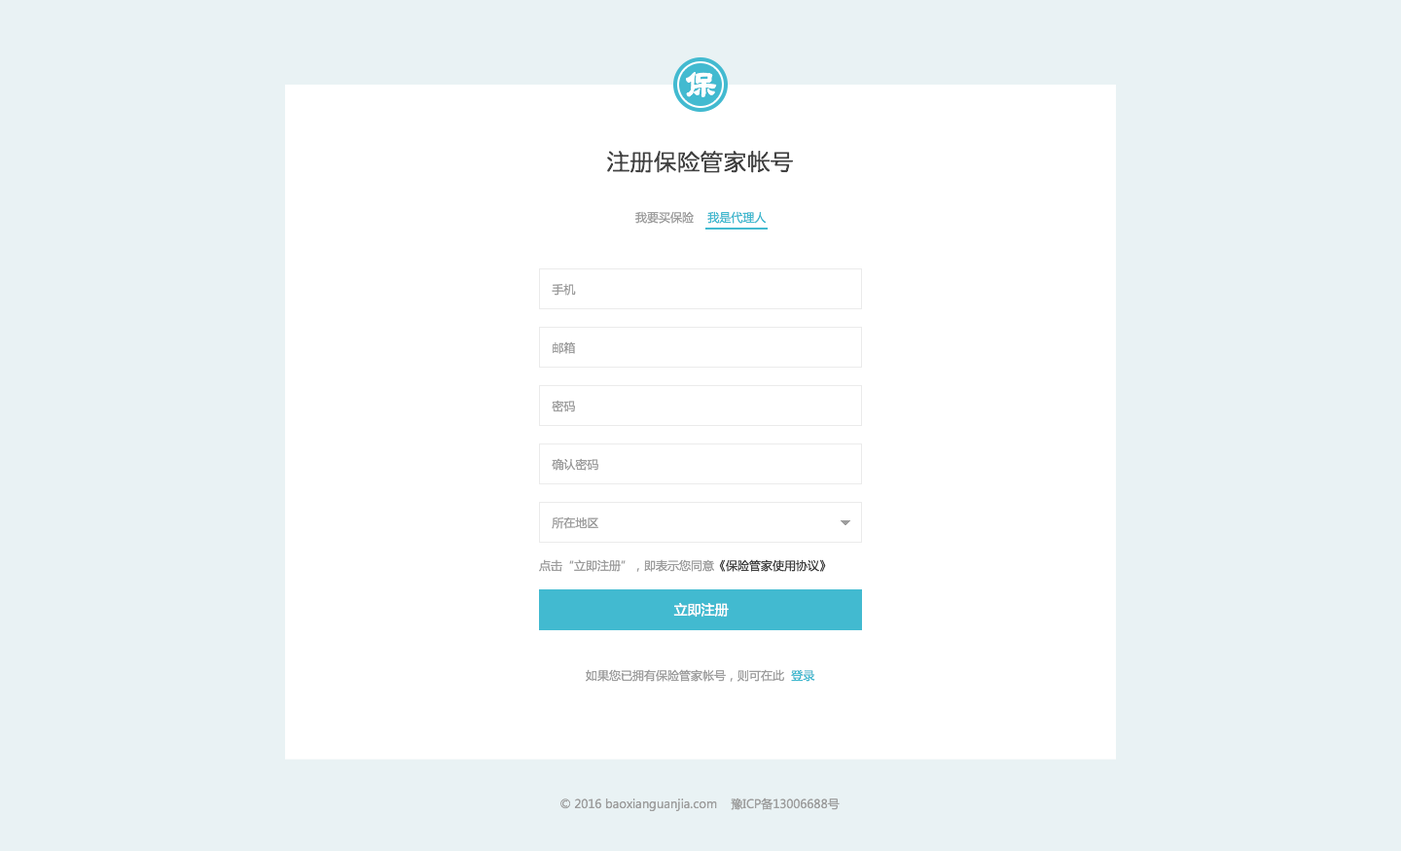
<style>
.page{position:relative;width:1401px;height:851px;background:#e9f2f4}
.page>*{position:absolute;margin:0}
.t1{font:31.1px "ReishoOtf";color:#ffffff}
.t2{font:23.3px "AaRoundLi";color:#424242}
.t3{font:11.7px "MicrosoftYaHei";color:#9e9e9e}
.t4{font:11.7px "MicrosoftYaHei";color:#42bad0}
.t5{font:11.7px "MicrosoftYaHei";color:#424242}
.t6{font:13.6px "MicrosoftYaHei";color:#ffffff}
</style>
<div class="page">
<p class="t1" style="left:686px;top:72px;width:31px;height:25px">保</p>
<p class="t2" style="left:607px;top:151px;width:186px;height:22px">注册保险管家帐号</p>
<p class="t3" style="left:635px;top:211px;width:132px;height:13px">我要买保险    <span class="t4">我是代理人</span></p>
<p class="t3" style="left:552px;top:283px;width:24px;height:13px">手机</p>
<p class="t3" style="left:553px;top:341px;width:23px;height:13px">邮箱</p>
<p class="t3" style="left:552px;top:400px;width:23px;height:12px">密码</p>
<p class="t3" style="left:552px;top:458px;width:46px;height:13px">确认密码</p>
<p class="t3" style="left:552px;top:517px;width:46px;height:12px">所在地区</p>
<p class="t3" style="left:539px;top:559px;width:287px;height:13px">点击“立即注册”，即表示您同意<span class="t5">《保险管家使用协议》</span></p>
<p class="t6" style="left:673px;top:602px;width:56px;height:15px">立即注册</p>
<p class="t3" style="left:586px;top:669px;width:229px;height:13px">如果您已拥有保险管家帐号，则可在此  <span class="t4">登录</span></p>
<p class="t3" style="left:560px;top:798px;width:280px;height:13px">© 2016 baoxianguanjia.com    豫ICP备13006688号</p>
</div>
